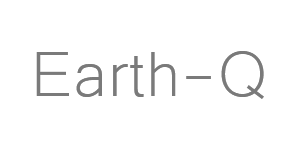
<style>
.page{position:relative;width:300px;height:150px;background:#ffffff}
.page>*{position:absolute;margin:0}
.t1{font:83.3px "Microsoft-Yi-Baiti";color:#7a7a7a}
</style>
<div class="page">
<p class="t1" style="left:36px;top:51px;width:228px;height:48px">Earth-Q</p>
</div>
